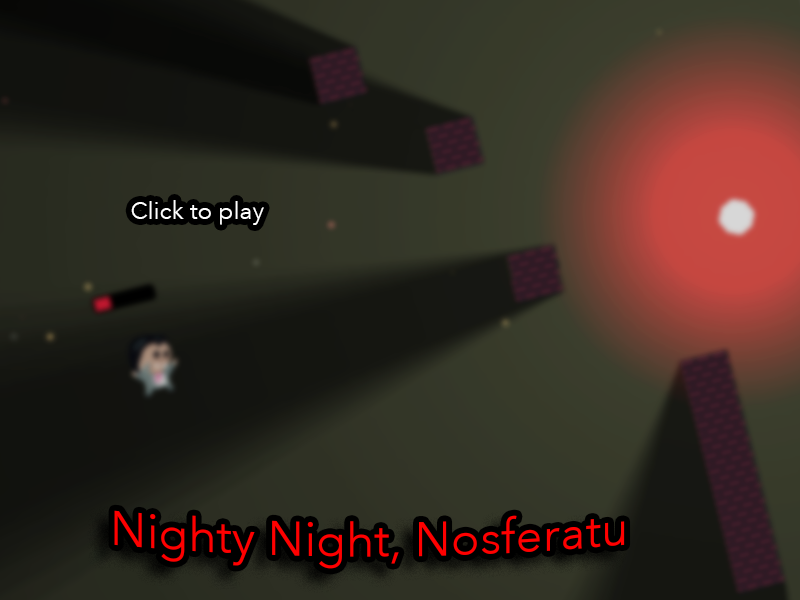
<style>
.page{position:relative;width:800px;height:600px}
.page>*{position:absolute;margin:0}
.t1{font:12px "AvenirNext-Regular";color:#ffffff}
.t2{font:48px "AvenirNext-Regular";color:#ff0000}
</style>
<div class="page">
<p class="t1" style="left:131px;top:200px;width:133px;height:25px">Click to play</p>
<p class="t2" style="left:114px;top:510px;width:511px;height:59px">Nighty Night, Nosferatu</p>
</div>
